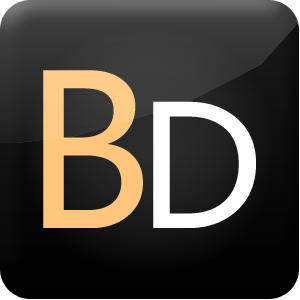
<style>
.page{position:relative;width:300px;height:300px}
.page>*{position:absolute;margin:0}
.t1{font:208.3px "MicrosoftYaHei";letter-spacing:-0.08em;color:#ffc77e}
.t2{font:166.7px "MicrosoftYaHei";letter-spacing:-0.08em;color:#ffffff}
</style>
<div class="page">
<p class="t1" style="left:43px;top:70px;width:213px;height:158px">B<span class="t2">D</span></p>
</div>
